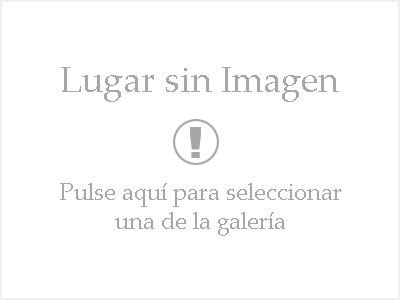
<style>
.page{position:relative;width:400px;height:300px;background:#ffffff}
.page>*{position:absolute;margin:0}
.t1{font:36px "PalatinoLinotype-Roman";color:#a7a7a7}
.t2{font:24px "PalatinoLinotype-Roman";color:#a7a7a7}
</style>
<div class="page">
<p class="t1" style="left:61px;top:67px;width:278px;height:35px">Lugar sin Imagen</p>
<p class="t2" style="left:60px;top:183px;width:281px;height:53px;text-align:center">Pulse aquí para seleccionar<br>una de la galería</p>
</div>
